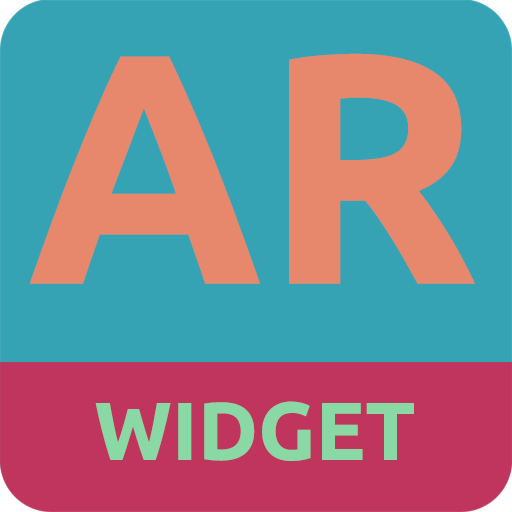
<style>
.page{position:relative;width:512px;height:512px;background:#35a3b4}
.page>*{position:absolute;margin:0}
.t1{font:327.7px "Ubuntu-Bold";color:#e7886c}
.t2{font:81.9px "Ubuntu-Bold";color:#8ad8a4}
</style>
<div class="page">
<p class="t1" style="left:29px;top:53px;width:446px;height:231px">AR</p>
<p class="t2" style="left:95px;top:401px;width:319px;height:60px">WIDGET</p>
</div>
